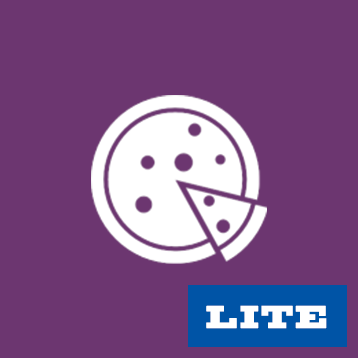
<style>
.page{position:relative;width:358px;height:358px;background:#6c3670}
.page>*{position:absolute;margin:0}
.t1{font:29.2px "BlackoakStd";letter-spacing:0.155em;color:#ffffff;font-weight:bold;scale:0.59 1}
</style>
<div class="page">
<p class="t1" style="left:206px;top:305px;width:121px;height:24px">LITE</p>
</div>
